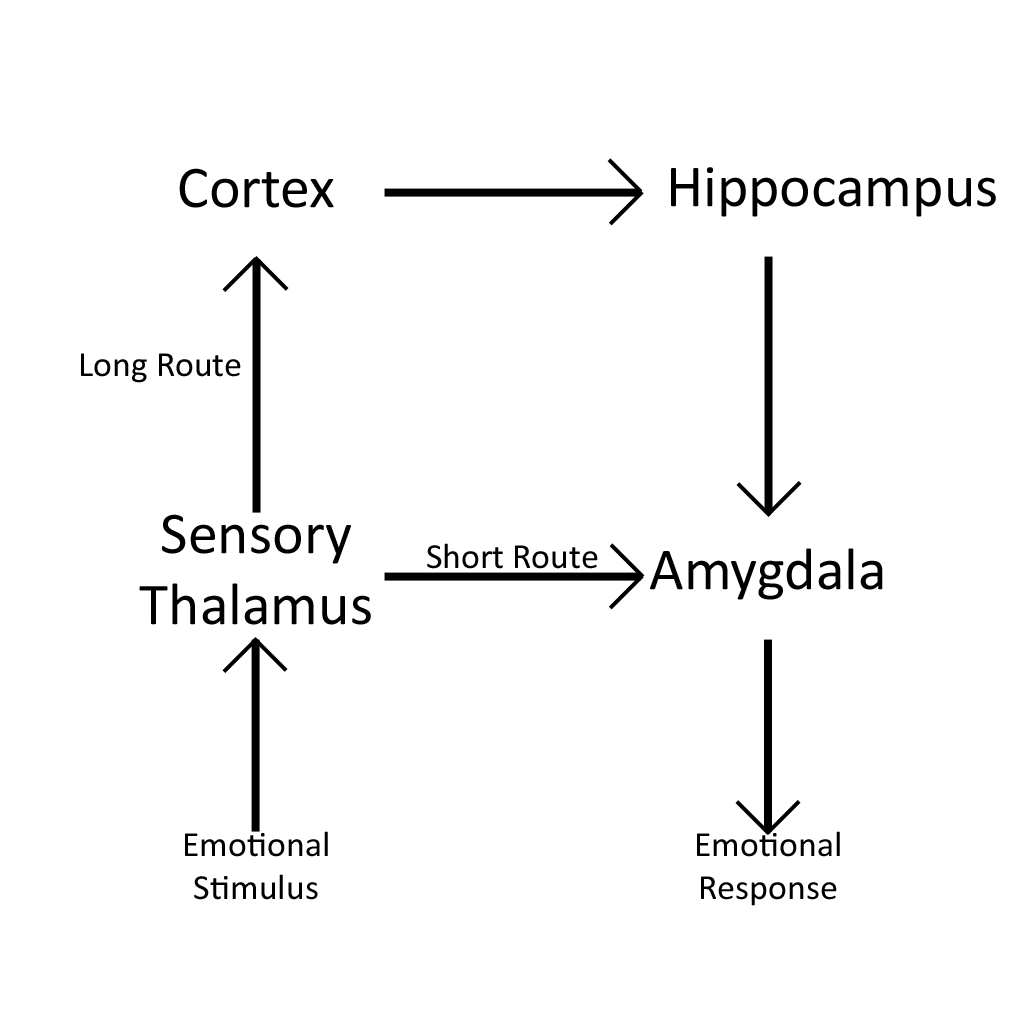
<style>
.page{position:relative;width:1024px;height:1024px;background:#ffffff}
.page>*{position:absolute;margin:0}
.t1{font:59.8px "Calibri";color:#000000}
.t2{font:35.9px "Calibri";color:#000000}
</style>
<div class="page">
<p class="t1" style="left:179px;top:168px;width:155px;height:40px">Cortex</p>
<p class="t1" style="left:671px;top:167px;width:325px;height:50px">Hippocampus</p>
<p class="t2" style="left:81px;top:353px;width:160px;height:30px">Long Route</p>
<p class="t1" style="left:139px;top:514px;width:232px;height:111px;text-align:center">Sensory<br>Thalamus</p>
<p class="t2" style="left:427px;top:543px;width:171px;height:26px">Short Route</p>
<p class="t1" style="left:650px;top:548px;width:233px;height:52px">Amygdala</p>
<p class="t2" style="left:185px;top:831px;width:143px;height:69px;text-align:center">Emotional Stimulus</p>
<p class="t2" style="left:697px;top:831px;width:143px;height:75px;text-align:center">Emotional Response</p>
</div>
